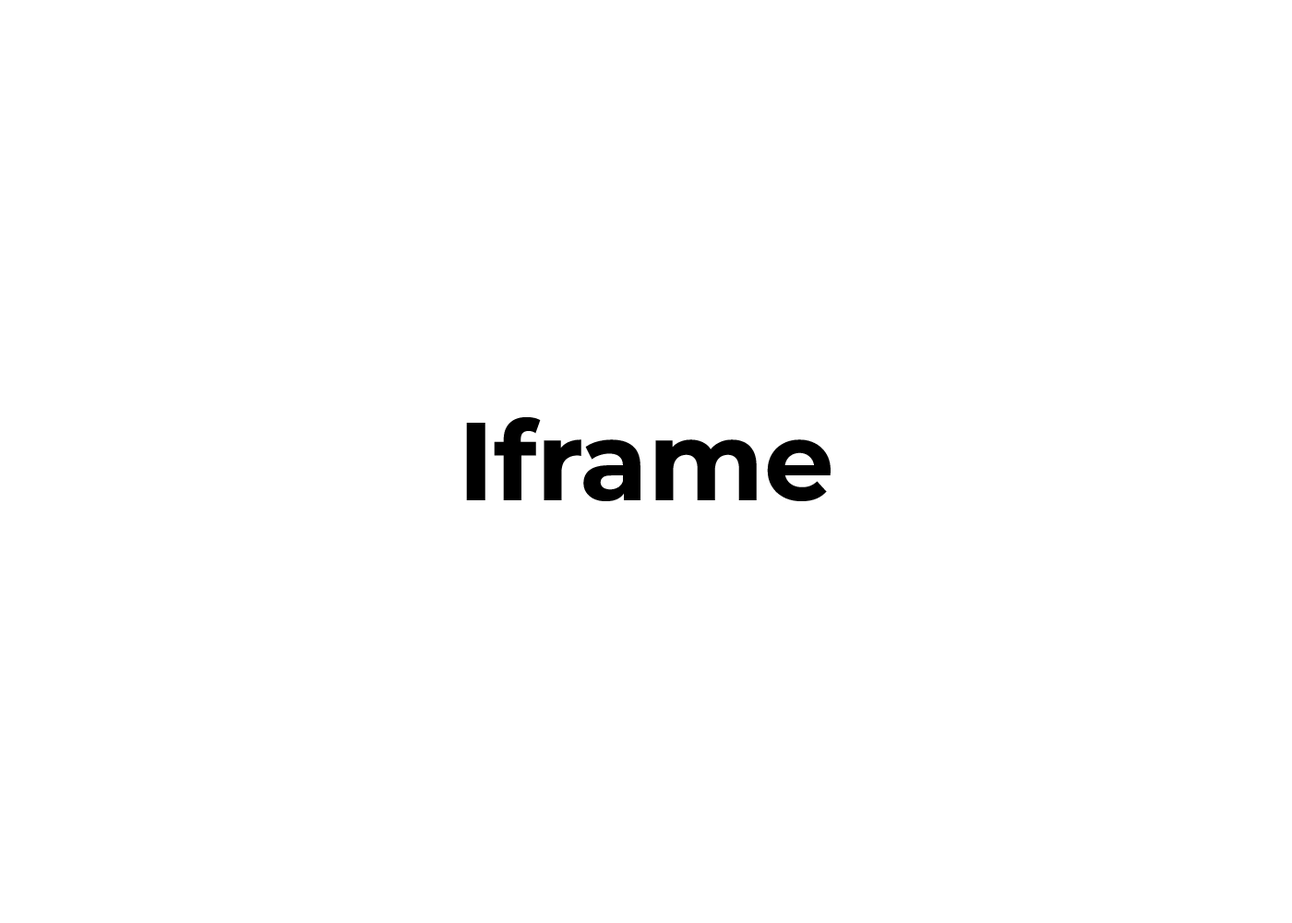
<style>
.page{position:relative;width:1292px;height:923px;background:#ffffff}
.page>*{position:absolute;margin:0}
.t1{font:110.7px "Montserrat-Bold";color:#000000}
</style>
<div class="page">
<p class="t1" style="left:466px;top:417px;width:365px;height:84px">Iframe</p>
</div>
